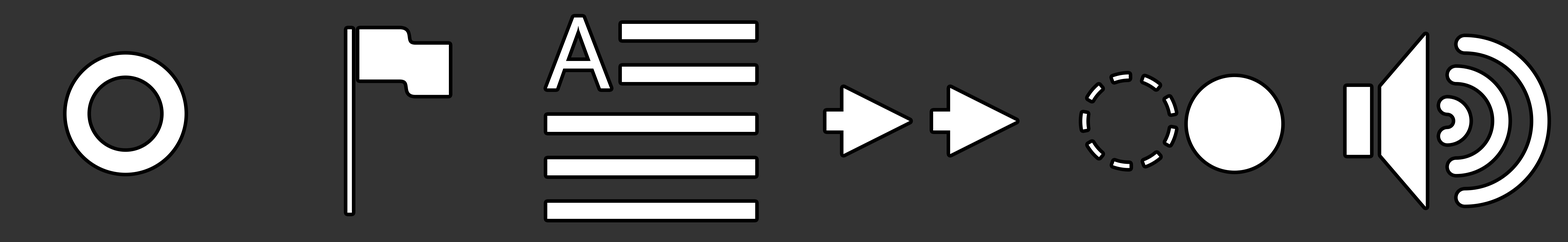
<style>
.page{position:relative;width:1568px;height:242px;background:#333333}
.page>*{position:absolute;margin:0}
.t1{font:101.2px "SegoeUI";color:#ffffff}
</style>
<div class="page">
<p class="t1" style="left:547px;top:17px;width:63px;height:71px">A</p>
</div>
